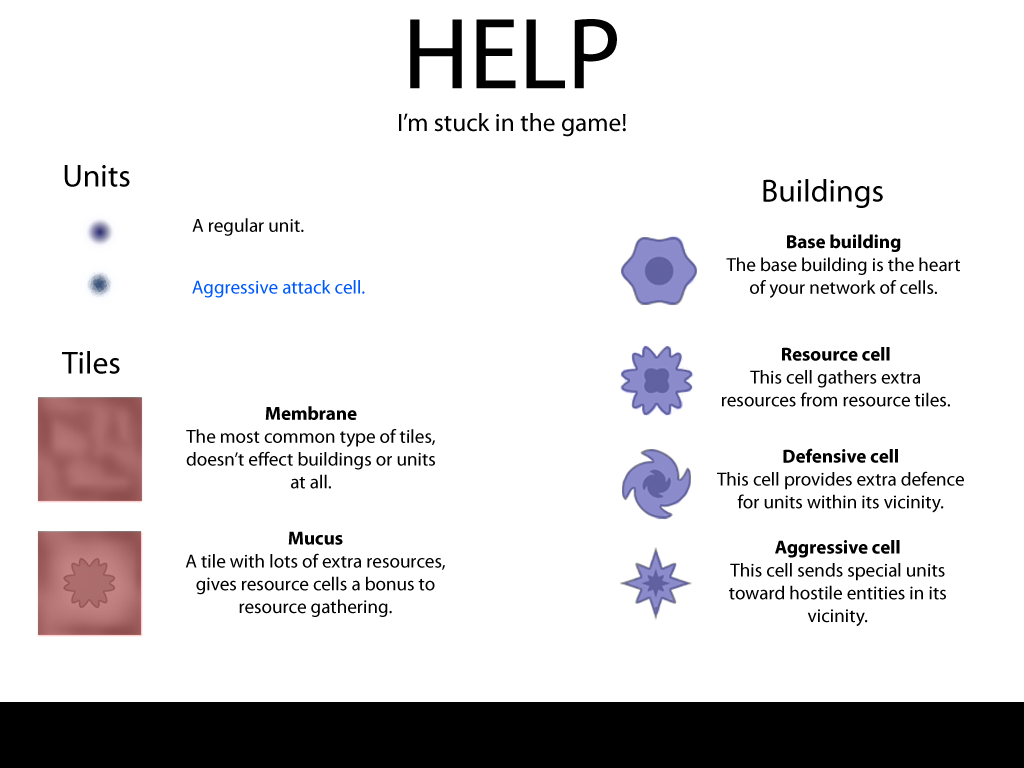
<style>
.page{position:relative;width:1024px;height:768px;background:#ffffff}
.page>*{position:absolute;margin:0}
.t1{font:101.6px "MyriadPro-Regular";color:#000000}
.t2{font:25.4px "MyriadPro-Regular";color:#000000}
.t3{font:31.7px "MyriadPro-Regular";color:#000000}
.t4{font:31.8px "MyriadPro-Regular";color:#000000}
.t5{font:19.1px "MyriadPro-Regular";color:#000000}
.t6{font:19.1px "MyriadPro-Bold";color:#000000}
.t7{font:19.1px "MyriadPro-Regular";color:#0059ff}
</style>
<div class="page">
<p class="t1" style="left:410px;top:19px;width:207px;height:70px">HELP</p>
<p class="t2" style="left:399px;top:113px;width:227px;height:24px">I’m stuck in the game!</p>
<p class="t3" style="left:64px;top:165px;width:66px;height:22px">Units</p>
<p class="t4" style="left:763px;top:179px;width:120px;height:29px">Buildings</p>
<p class="t5" style="left:192px;top:218px;width:112px;height:18px">A regular unit.</p>
<p class="t5" style="left:726px;top:234px;width:234px;height:64px;text-align:center"><span class="t6">Base building<br></span>The base building is the heart of your network of cells.</p>
<p class="t7" style="left:192px;top:280px;width:173px;height:18px">Aggressive attack cell.</p>
<p class="t4" style="left:62px;top:351px;width:58px;height:23px">Tiles</p>
<p class="t5" style="left:722px;top:347px;width:228px;height:60px;text-align:center"><span class="t6">Resource cell<br></span>This cell gathers extra <br>resources from resource tiles.</p>
<p class="t5" style="left:186px;top:406px;width:249px;height:83px;text-align:center"><span class="t6">Membrane<br></span>The most common type of tiles, doesn’t effect buildings or units at all.</p>
<p class="t5" style="left:717px;top:448px;width:247px;height:65px;text-align:center"><span class="t6">Defensive cell<br></span>This cell provides extra defence for units within its vicinity.</p>
<p class="t5" style="left:185px;top:531px;width:260px;height:86px;text-align:center"><span class="t6">Mucus<br></span>A tile with lots of extra resources, gives resource cells a bonus to resource gathering.</p>
<p class="t5" style="left:729px;top:540px;width:217px;height:87px;text-align:center"><span class="t6">Aggressive cell<br></span>This cell sends special units toward hostile entities in its vicinity.</p>
</div>
